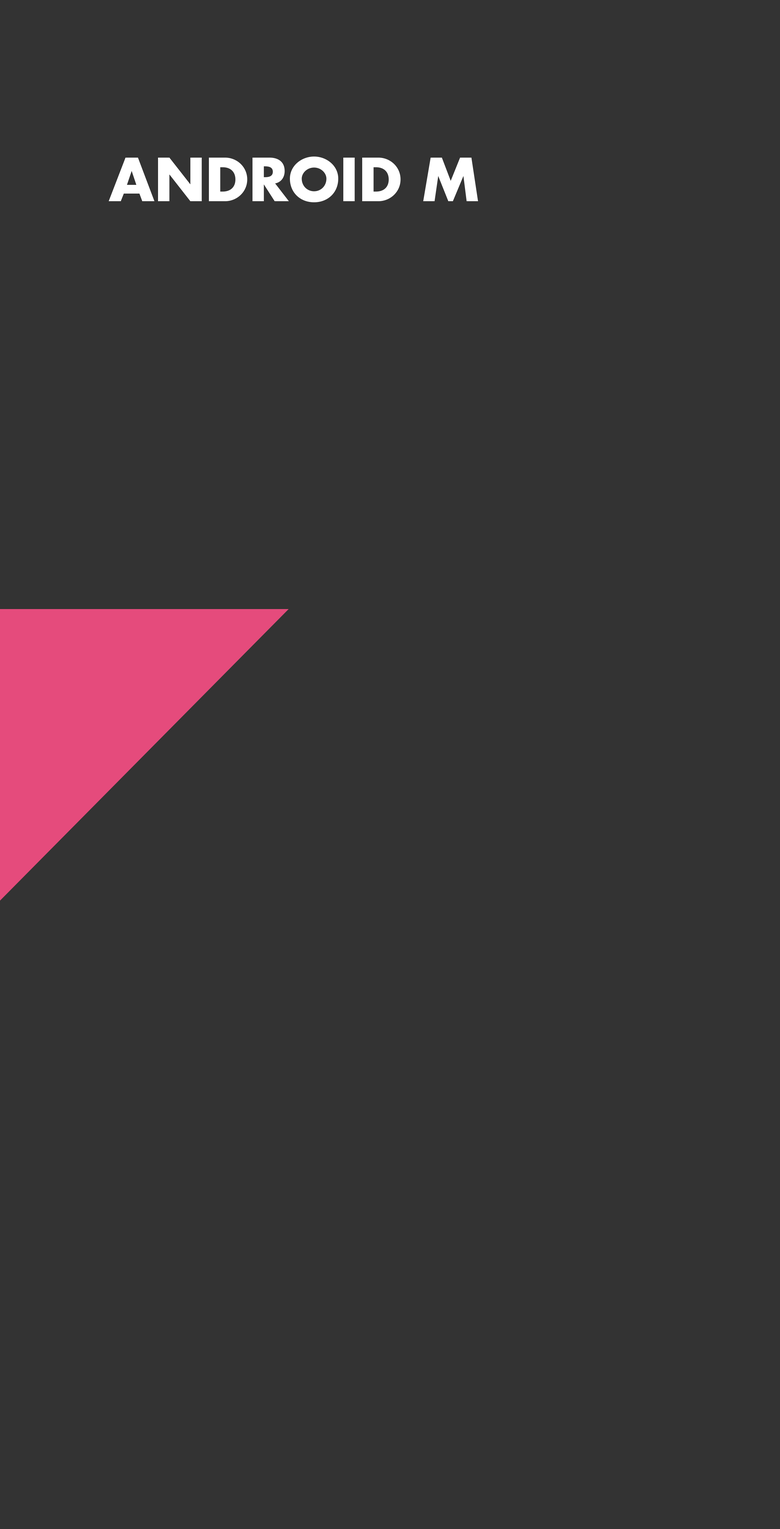
<style>
.page{position:relative;width:780px;height:1529px;background:#333333}
.page>*{position:absolute;margin:0}
.t1{font:57.9px "FuturaStd-Bold";color:#ffffff}
</style>
<div class="page">
<p class="t1" style="left:109px;top:157px;width:369px;height:45px">ANDROID M</p>
</div>
